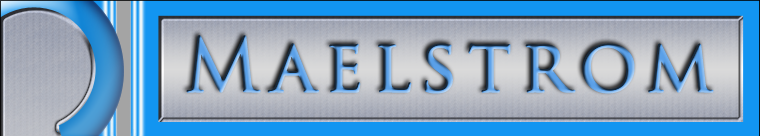
<style>
.page{position:relative;width:760px;height:136px;background:#1295f1}
.page>*{position:absolute;margin:0}
.t1{font:72px "TrajanPro-Regular";letter-spacing:0.1em;font-weight:bold}
</style>
<div class="page">
<p class="t1" style="left:186px;top:35px;width:528px;height:59px">Maelstrom</p>
</div>
